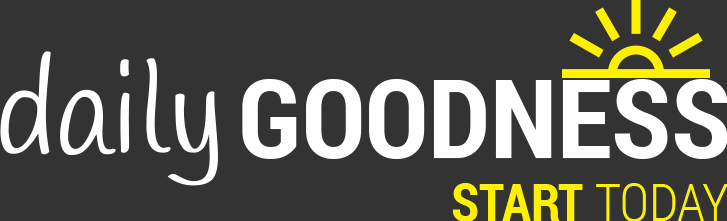
<style>
.page{position:relative;width:727px;height:221px;background:#333333}
.page>*{position:absolute;margin:0}
.t1{font:127.4px "Handlee-Regular";color:#ffffff}
.t2{font:110.5px "RobotoCondensed-Bold";color:#ffffff}
.t3{font:51.8px "RobotoCondensed-Bold";color:#fef100}
.t4{font:51.8px "RobotoCondensed-Light";color:#fef100}
</style>
<div class="page">
<p class="t1" style="left:0px;top:51px;width:218px;height:135px">daily</p>
<p class="t2" style="left:242px;top:79px;width:486px;height:80px">GOODNESS</p>
<p class="t3" style="left:452px;top:183px;width:276px;height:39px">START <span class="t4">TODAY</span></p>
</div>
